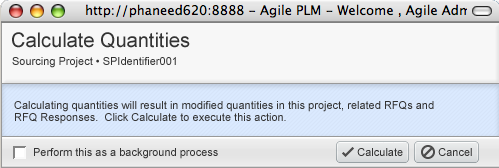
<style>
.page{position:relative;width:499px;height:168px;background:#f7f7f7}
.page>*{position:absolute;margin:0}
.t1{font:20px "ArialMT";color:#333333}
.t2{font:11px "ArialMT";color:#333333}
.t3{font:11px/12px "ArialMT";color:#333333}
</style>
<div class="page">
<p class="t1" style="left:12px;top:32px;width:178px;height:16px">Calculate Quantities</p>
<p class="t2" style="left:12px;top:57px;width:164px;height:11px">Sourcing Project • SPIdentifier001</p>
<p class="t3" style="left:14px;top:101px;width:420px;height:23px">Calculating quantities will result in modified quantities in this project, related RFQs and<br>RFQ Responses.  Click Calculate to execute this action.</p>
<p class="t2" style="left:34px;top:148px;width:184px;height:11px">Perform this as a background process</p>
<p class="t2" style="left:357px;top:148px;width:46px;height:8px">Calculate</p>
<p class="t2" style="left:438px;top:148px;width:34px;height:8px">Cancel</p>
</div>
